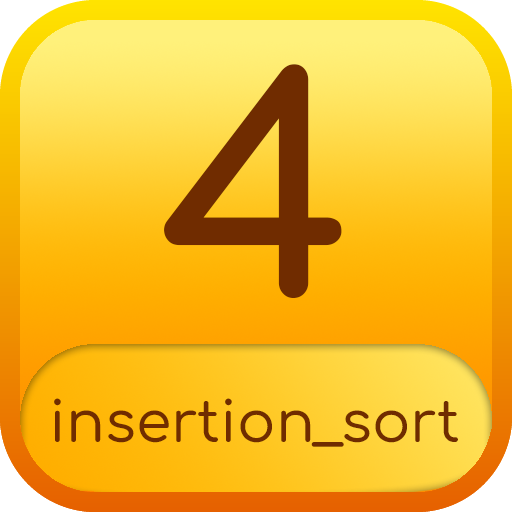
<style>
.page{position:relative;width:512px;height:512px}
.page>*{position:absolute;margin:0}
.t1{font:299.2px "Comfortaa-Bold";color:#702c00;text-transform:uppercase}
.t2{font:57px "Comfortaa-Medium";color:#702c00}
</style>
<div class="page">
<p class="t1" style="left:164px;top:64px;width:178px;height:234px">4</p>
<p class="t2" style="left:54px;top:398px;width:404px;height:49px">insertion_sort</p>
</div>
